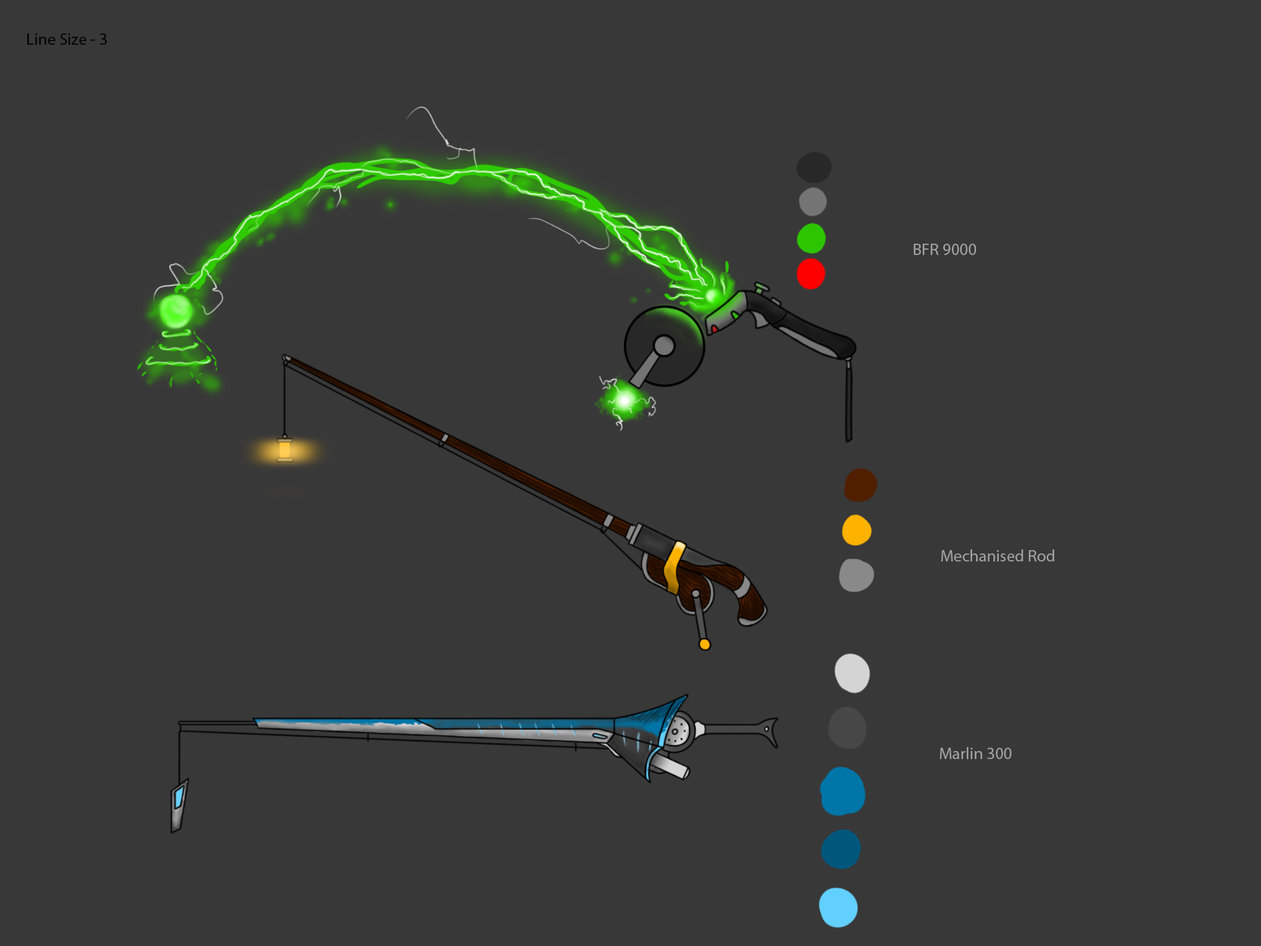
<style>
.page{position:relative;width:1261px;height:946px;background:#383838}
.page>*{position:absolute;margin:0}
.t1{font:16.7px "MyriadPro-Regular";color:#000000}
.t2{font:16.7px "MyriadPro-Regular";color:#a2a2a2}
</style>
<div class="page">
<p class="t1" style="left:27px;top:33px;width:80px;height:12px">Line Size - 3</p>
<p class="t2" style="left:913px;top:244px;width:63px;height:11px">BFR 9000</p>
<p class="t2" style="left:941px;top:549px;width:113px;height:12px">Mechanised Rod</p>
<p class="t2" style="left:940px;top:747px;width:72px;height:12px">Marlin 300</p>
</div>
